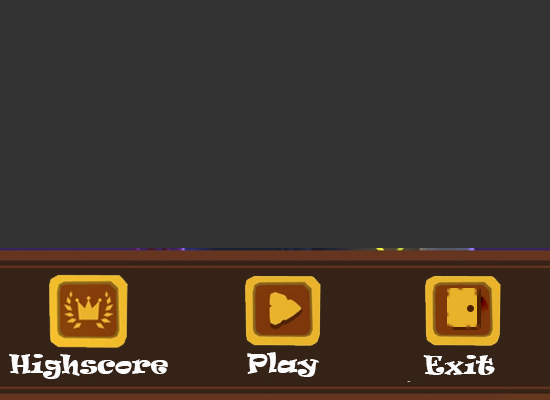
<style>
.page{position:relative;width:550px;height:400px;background:#333333}
.page>*{position:absolute;margin:0}
.t1{font:24.2px "Ravie";color:#fbfbfb}
.t2{font:24px "Ravie";color:#fbfbfb}
</style>
<div class="page">
<p class="t1" style="left:247px;top:352px;width:72px;height:25px">Play</p>
<p class="t2" style="left:9px;top:354px;width:159px;height:25px">Highscore</p>
<p class="t1" style="left:423px;top:355px;width:72px;height:20px">Exit</p>
</div>
